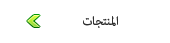
<style>
.page{position:relative;width:170px;height:43px;background:#ffffff}
.page>*{position:absolute;margin:0}
.t1{font:17px "AdobeArabic-Regular";color:#2f2f2f}
</style>
<div class="page">
<p class="t1" style="left:83px;top:16px;width:35px;height:12px">المنتجات</p>
</div>
